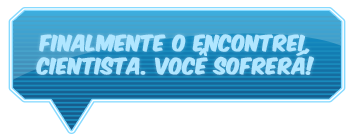
<style>
.page{position:relative;width:350px;height:140px;background:#ffffff}
.page>*{position:absolute;margin:0}
.t1{font:19.1px "KomikaAxis";color:#b0e6ff;font-weight:bold}
</style>
<div class="page">
<p class="t1" style="left:36px;top:34px;width:278px;height:41px;text-align:center">finalmente o encontrei,<br>cientista. você sofrerá!</p>
</div>
